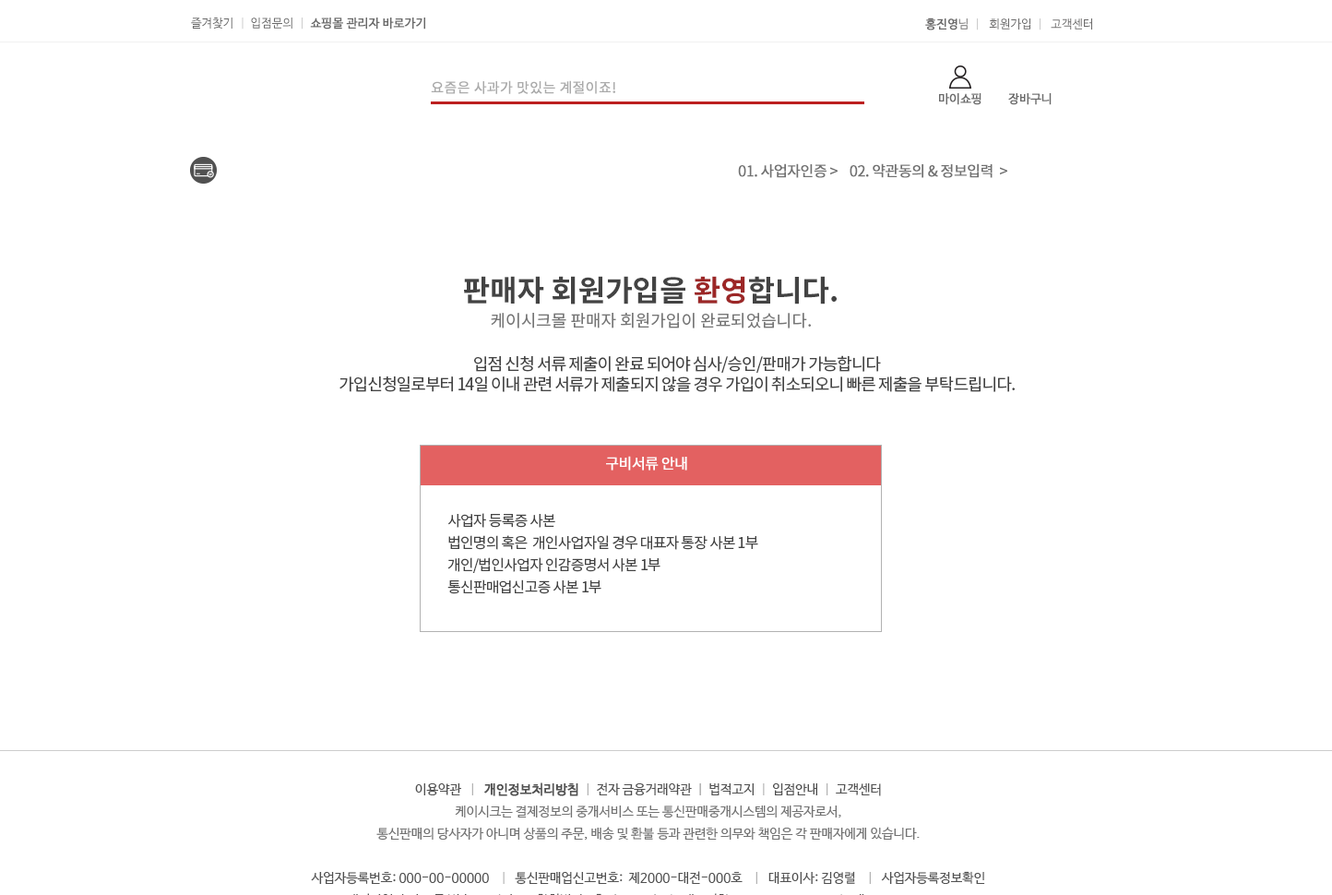
<style>
.page{position:relative;width:1332px;height:895px;background:#ffffff}
.page>*{position:absolute;margin:0}
.t1{font:12px "NanumBarunGothic";color:#686868;font-weight:bold}
.t2{font:12px "NanumBarunGothic";color:#686868}
.t3{font:12px "NanumBarunGothic";color:#cccccc}
.t4{font:12px "NanumBarunGothic";color:#696868}
.t5{font:12px "NanumBarunGothic";color:#696868;font-weight:bold}
.t6{font:13.8px "NotoSansCJKkr-Regular";color:#aaaaaa;font-weight:bold}
.t7{font:12px "NanumBarunGothic";color:#6a6a6a;font-weight:bold}
.t8{font:14.8px "NotoSansCJKkr-Regular";letter-spacing:-0.05em;color:#717171;font-weight:bold}
.t9{font:14.8px "NotoSansCJKkr-Regular";letter-spacing:-0.05em;color:#ffffff;font-weight:bold}
.t10{font:29.5px "NotoSansCJKkr-Bold";color:#434343}
.t11{font:29.5px "NotoSansCJKkr-Bold";color:#9c2727}
.t12{font:16.6px "NotoSansCJKkr-Regular";color:#767676}
.t13{font:16.6px/20.3px "NotoSansCJKkr-Regular";letter-spacing:-0.05em;color:#434343}
.t14{font:14.8px/22.1px "NotoSansCJKkr-Regular";letter-spacing:-0.05em;color:#434343}
</style>
<div class="page">
<p class="t1" style="left:191px;top:18px;width:234px;height:12px"><span class="t2">즐겨찾기  </span><span class="t3">| </span><span class="t2"> 입점문의  </span><span class="t3">|  </span>쇼핑몰 관리자 바로가기</p>
<p class="t4" style="left:925px;top:18px;width:167px;height:12px"><span class="t5">홍진영</span>님  <span class="t3">|   </span>회원가입  <span class="t3">|   </span>고객센터</p>
<p class="t6" style="left:431px;top:80px;width:184px;height:14px">요즘은 사과가 맛있는 계절이죠!</p>
<p class="t7" style="left:939px;top:93px;width:43px;height:12px">마이쇼핑</p>
<p class="t7" style="left:1008px;top:93px;width:44px;height:12px">장바구니</p>
<p class="t8" style="left:738px;top:163px;width:354px;height:15px">01. 사업자인증 &gt;    02. 약관동의 &amp; 정보입력  &gt;    <span class="t9">03.가입완료</span></p>
<p class="t10" style="left:464px;top:276px;width:373px;height:28px">판매자 회원가입을 <span class="t11">환영</span>합니다.</p>
<p class="t12" style="left:491px;top:313px;width:320px;height:15px">케이시크몰 판매자 회원가입이 완료되었습니다.</p>
<p class="t13" style="left:340px;top:355px;width:675px;height:37px;text-align:center">입점 신청 서류 제출이 완료 되어야 심사/승인/판매가 가능합니다<br>가입신청일로부터 14일 이내 관련 서류가 제출되지 않을 경우 가입이 취소되오니 빠른 제출을 부탁드립니다.</p>
<p class="t9" style="left:606px;top:456px;width:81px;height:15px">구비서류 안내</p>
<p class="t14" style="left:447px;top:513px;width:311px;height:81px">사업자 등록증 사본<br>법인명의 혹은  개인사업자일 경우 대표자 통장 사본 1부<br>개인/법인사업자 인감증명서 사본 1부 <br>통신판매업신고증 사본 1부</p>
</div>
